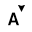
<style>
.page{position:relative;width:32px;height:32px;background:#ffffff}
.page>*{position:absolute;margin:0}
.t1{font:18px "Roboto-Bold";letter-spacing:0.025em;color:#000000}
</style>
<div class="page">
<p class="t1" style="left:8px;top:12px;width:11px;height:14px">A</p>
</div>
